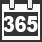
<style>
.page{position:relative;width:42px;height:42px;background:#333333}
.page>*{position:absolute;margin:0}
.t1{font:22px "Arial-Black";color:#ffffff;scale:0.8 1}
</style>
<div class="page">
<p class="t1" style="left:3px;top:16px;width:35px;height:16px">365</p>
</div>
